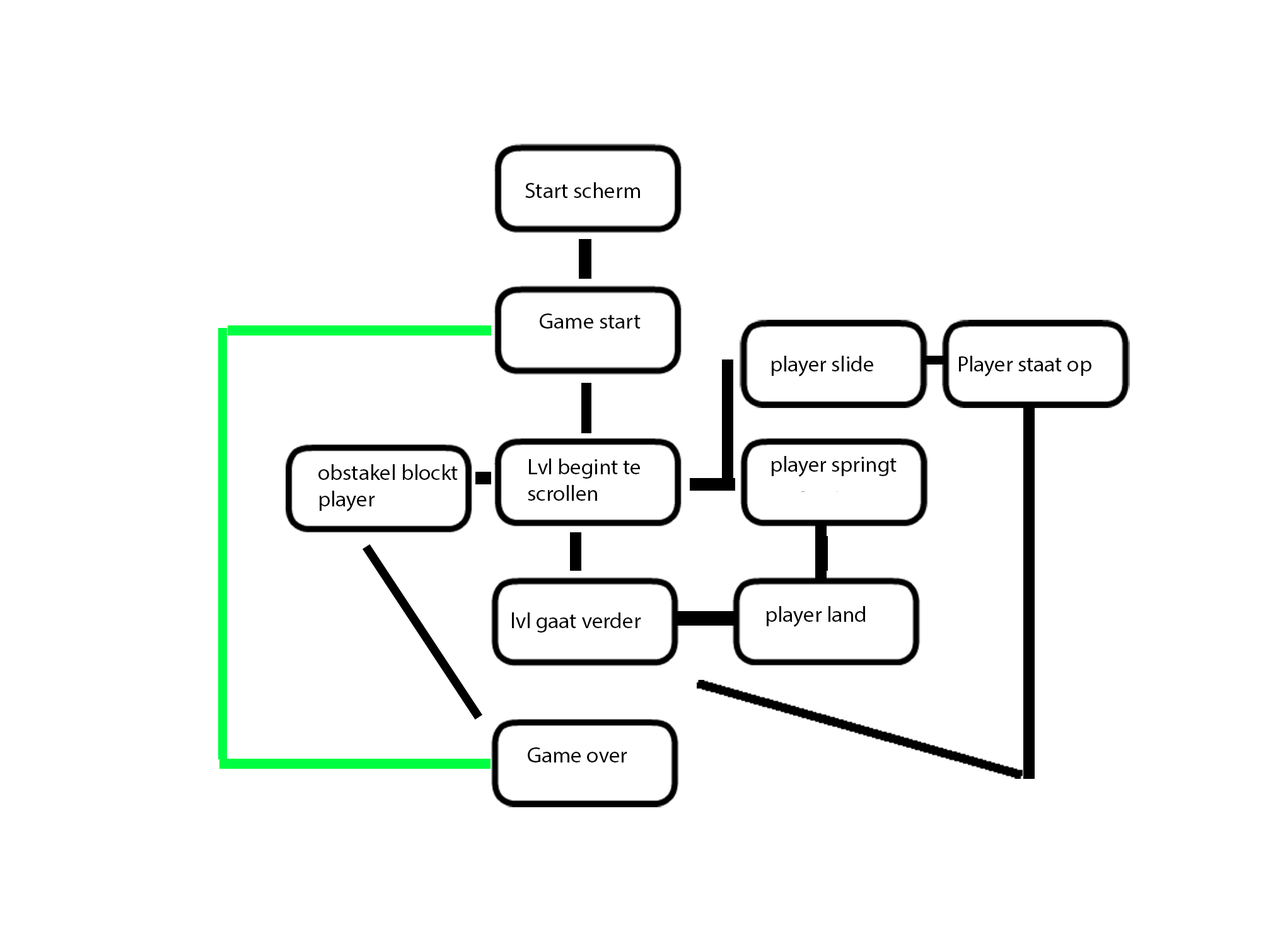
<style>
.page{position:relative;width:1261px;height:946px;background:#ffffff}
.page>*{position:absolute;margin:0}
.t1{font:22.2px "MyriadPro-Regular";color:#000000}
</style>
<div class="page">
<p class="t1" style="left:525px;top:182px;width:115px;height:16px">Start scherm</p>
<p class="t1" style="left:540px;top:313px;width:101px;height:15px">Game start</p>
<p class="t1" style="left:772px;top:356px;width:101px;height:20px">player slide</p>
<p class="t1" style="left:959px;top:356px;width:132px;height:20px">Player staat op</p>
<p class="t1" style="left:528px;top:458px;width:112px;height:43px">Lvl begint te scrollen</p>
<p class="t1" style="left:772px;top:456px;width:125px;height:21px">player springt</p>
<p class="t1" style="left:318px;top:464px;width:140px;height:47px">obstakel blockt player</p>
<p class="t1" style="left:767px;top:606px;width:99px;height:21px">player land</p>
<p class="t1" style="left:512px;top:612px;width:129px;height:20px">lvl gaat verder</p>
<p class="t1" style="left:528px;top:747px;width:99px;height:15px">Game over</p>
</div>
